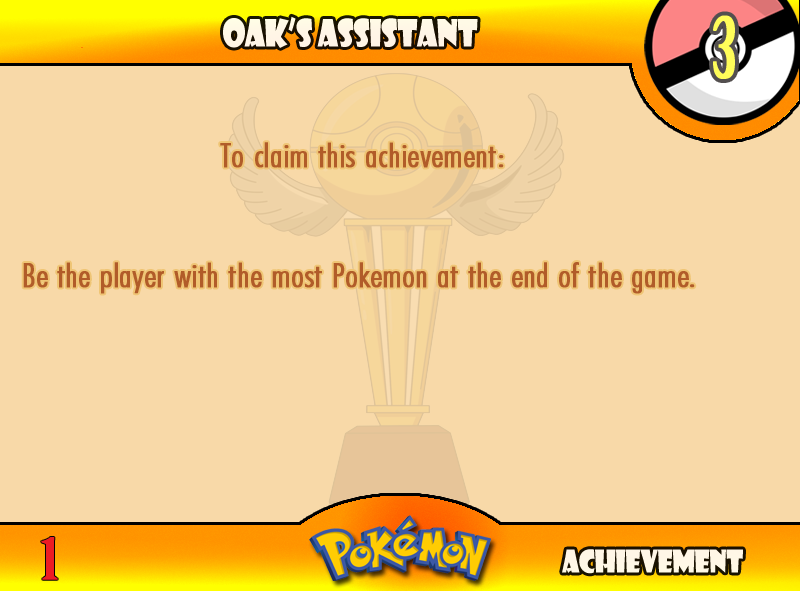
<style>
.page{position:relative;width:800px;height:591px;background:#f8d9a8}
.page>*{position:absolute;margin:0}
.t1{font:36.7px "ShowcardGothic-Reg";letter-spacing:-0.025em;color:#fff6e6;scale:0.91 1}
.t2{font:83.3px "BirchStd";letter-spacing:0.025em;color:#fffd59;font-weight:bold}
.t3{font:33.3px "FuturaCondensedBQ-Light";color:#b15c29;font-weight:bold;scale:1.08 1}
.t4{font:55.6px "BirchStd";color:#ed1c24;font-weight:bold;scale:1.5 1}
.t5{font:30.6px "ShowcardGothic-Reg";letter-spacing:-0.025em;color:#fff7e6;scale:0.91 1}
</style>
<div class="page">
<p class="t1" style="left:223px;top:16px;width:255px;height:32px">Oak’s Assistant</p>
<p class="t2" style="left:713px;top:15px;width:22px;height:64px">3</p>
<p class="t3" style="left:23px;top:142px;width:672px;height:152px">To claim this achievement:<br><br><br>Be the player with the most Pokemon at the end of the game.</p>
<p class="t4" style="left:41px;top:537px;width:17px;height:43px">1</p>
<p class="t5" style="left:562px;top:549px;width:181px;height:25px">Achievement</p>
</div>
